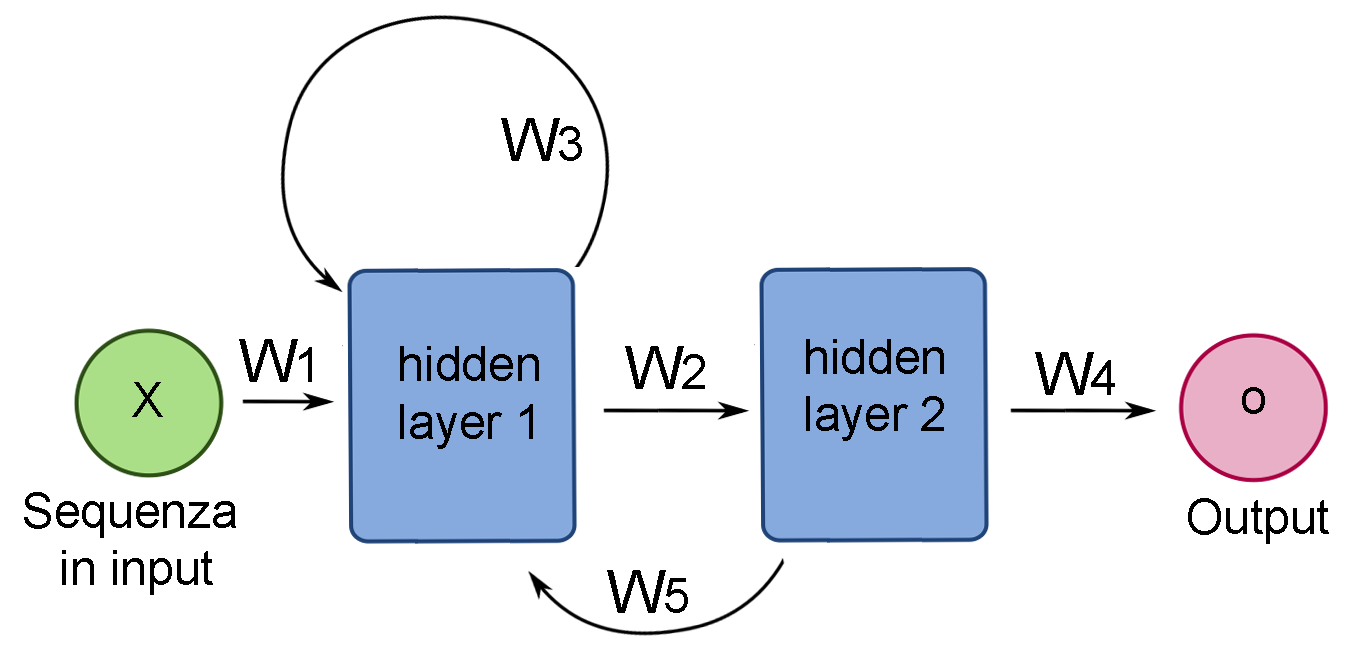
<style>
.page{position:relative;width:1351px;height:652px;background:#ffffff}
.page>*{position:absolute;margin:0}
.t1{font:60px "ArialMT";color:#000000}
.t2{font:48px "ArialMT";color:#000000}
</style>
<div class="page">
<p class="t1" style="left:501px;top:118px;width:81px;height:43px">W<span class="t2">3</span></p>
<p class="t1" style="left:239px;top:339px;width:73px;height:43px">W<span class="t2">1</span></p>
<p class="t2" style="left:806px;top:339px;width:138px;height:102px;text-align:center">hidden<br>layer 2</p>
<p class="t2" style="left:400px;top:346px;width:139px;height:103px;text-align:center">hidden<br>layer 1</p>
<p class="t1" style="left:625px;top:346px;width:80px;height:43px">W<span class="t2">2</span></p>
<p class="t1" style="left:1035px;top:352px;width:80px;height:43px">W<span class="t2">4</span></p>
<p class="t2" style="left:132px;top:382px;width:31px;height:35px">X</p>
<p class="t2" style="left:1242px;top:387px;width:23px;height:27px">o</p>
<p class="t2" style="left:24px;top:492px;width:212px;height:103px;text-align:center">Sequenza <br>in input</p>
<p class="t2" style="left:1188px;top:498px;width:141px;height:46px">Output</p>
<p class="t1" style="left:607px;top:570px;width:81px;height:43px">W<span class="t2">5</span></p>
</div>
